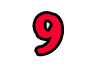
<style>
.page{position:relative;width:101px;height:77px;background:#ffffff}
.page>*{position:absolute;margin:0}
.t1{font:48px "Algerian";letter-spacing:-0.01em;color:#fe0030;font-weight:bold}
</style>
<div class="page">
<p class="t1" style="left:35px;top:14px;width:26px;height:40px">9</p>
</div>
